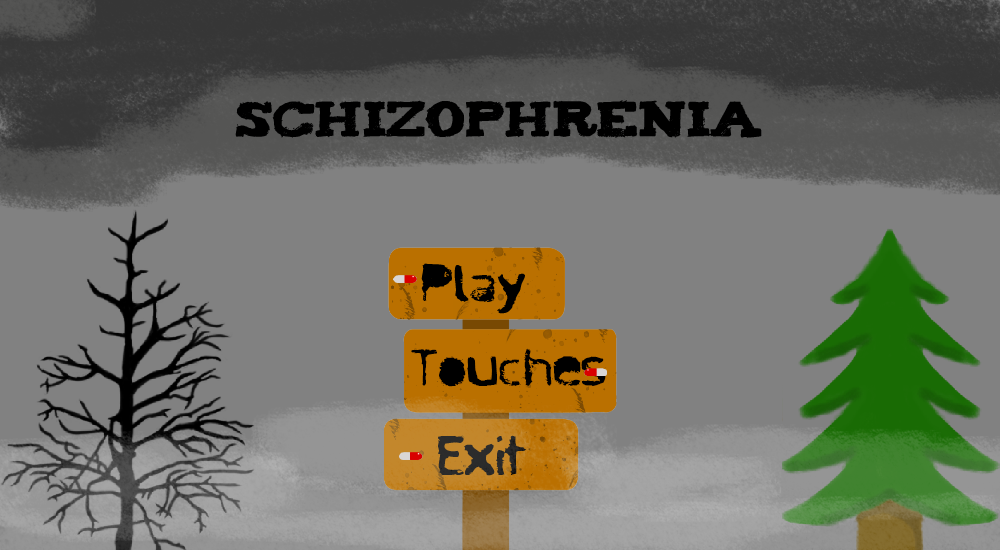
<style>
.page{position:relative;width:1000px;height:550px;background:#818181}
.page>*{position:absolute;margin:0}
.t1{font:40.2px "Tiza";color:#000000;scale:1.06 1}
.t2{font:48.8px "Antisocial";color:#000000;scale:1.3 1}
.t3{font:46.6px "Antisocial";color:#000000;scale:1.27 1}
.t4{font:48.8px "Antisocial";color:#2b2b2b;scale:1.3 1}
</style>
<div class="page">
<p class="t1" style="left:235px;top:100px;width:527px;height:38px">schizophrenia</p>
<p class="t2" style="left:421px;top:263px;width:104px;height:51px">Play</p>
<p class="t3" style="left:411px;top:348px;width:195px;height:39px">Touches</p>
<p class="t4" style="left:438px;top:435px;width:88px;height:41px">Exit</p>
</div>
